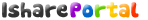
<style>
.page{position:relative;width:148px;height:20px;background:#ffffff}
.page>*{position:absolute;margin:0}
.t1{font:20.8px "Cookies";color:#333333}
.t2{font:20.8px "Cookies";color:#9900cc}
.t3{font:20.8px "Cookies";color:#0066cc}
.t4{font:20.8px "Cookies";color:#66cc00}
.t5{font:20.8px "Cookies";color:#ffcc00}
.t6{font:20.8px "Cookies";color:#ff9900}
.t7{font:20.8px "Cookies";color:#ff3300}
</style>
<div class="page">
<p class="t1" style="left:2px;top:2px;width:66px;height:16px">Ishare</p>
<p class="t2" style="left:70px;top:2px;width:69px;height:16px">P<span class="t3">o</span><span class="t4">r</span><span class="t5">t</span><span class="t6">a</span><span class="t7">l</span></p>
</div>
